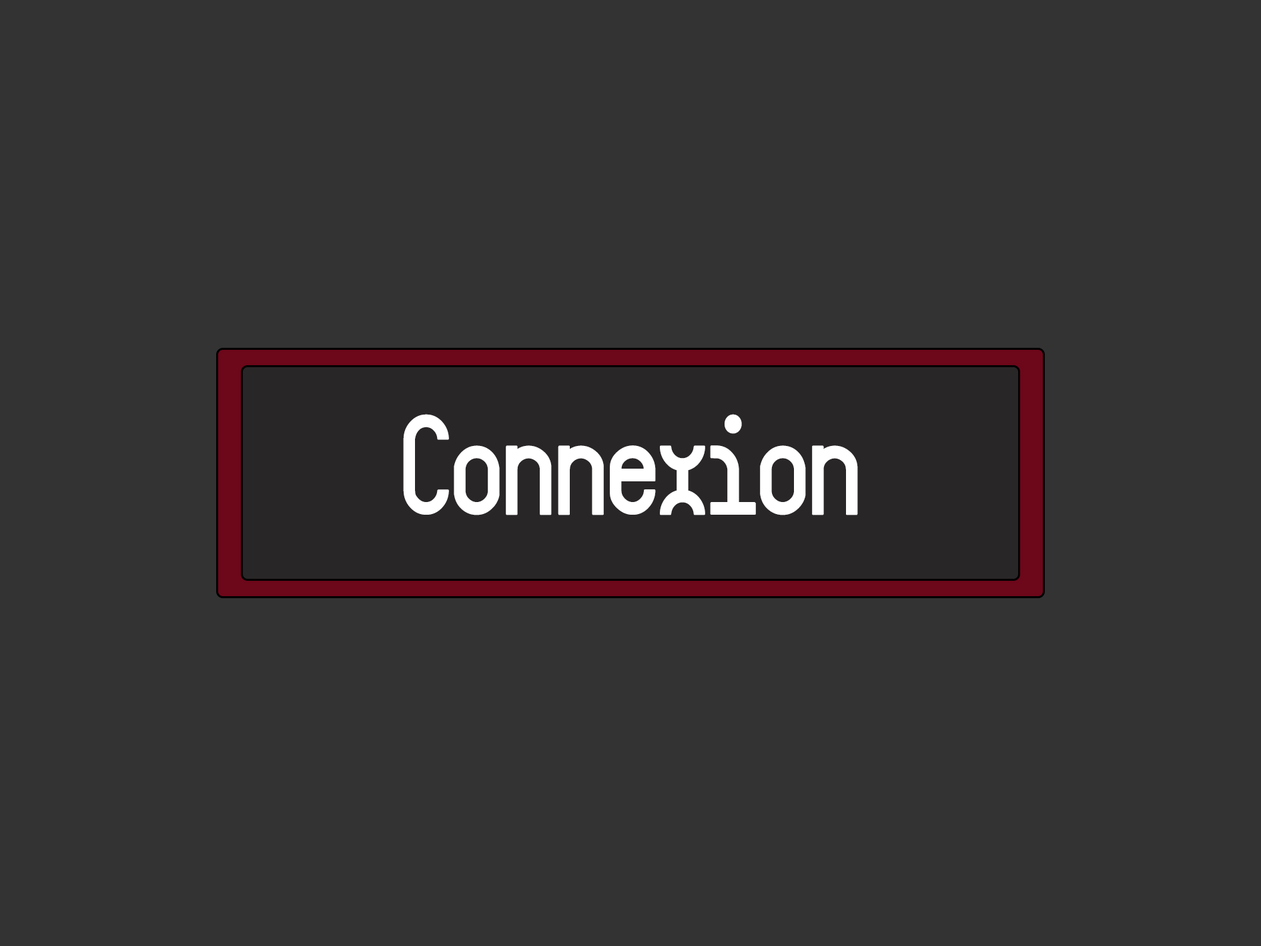
<style>
.page{position:relative;width:1261px;height:946px;background:#333333}
.page>*{position:absolute;margin:0}
.t1{font:125.2px "Targa";color:#ffffff;scale:0.9 1}
</style>
<div class="page">
<p class="t1" style="left:403px;top:414px;width:455px;height:101px">Connexion</p>
</div>
